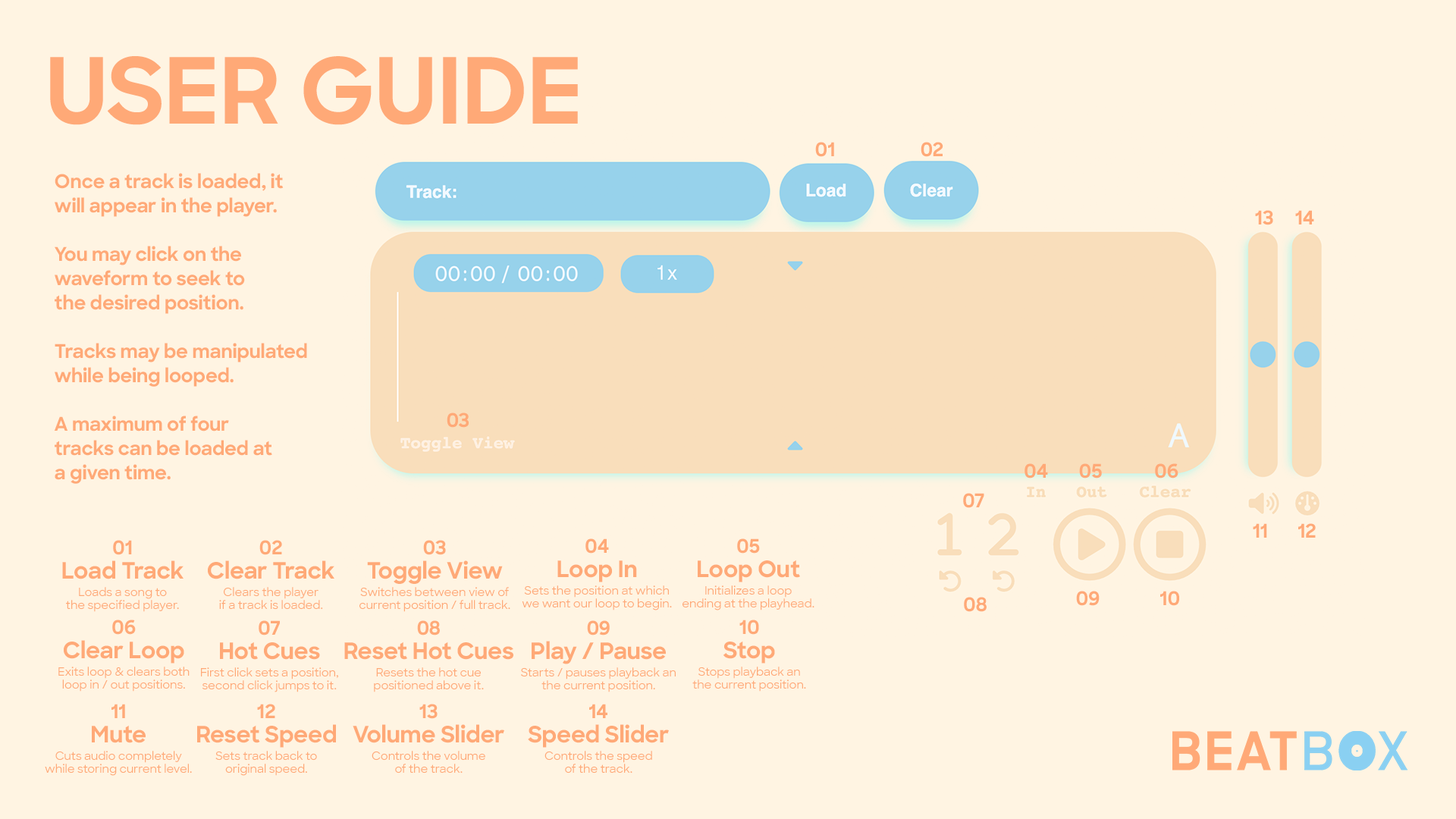
<style>
.page{position:relative;width:1456px;height:819px;background:#fff4e2}
.page>*{position:absolute;margin:0}
.t1{font:91px "SharpSans-Bold";letter-spacing:-0.01em;color:#ffa977}
.t2{font:19px "SharpSans-Bold";letter-spacing:-0.01em;color:#ffa977}
.t3{font:19px/24.3px "SharpSans-Bold";letter-spacing:-0.01em;color:#ffa977}
.t4{font:11.4px/12.9px "SharpSans-Medium";letter-spacing:-0.01em;color:#ffa977}
.t5{font:22.7px/24.3px "SharpSans-Bold";letter-spacing:-0.01em;color:#ffa977}
.t6{font:11.4px/17.4px "SharpSans-Medium";letter-spacing:-0.01em;color:#ffa977}
</style>
<div class="page">
<p class="t1" style="left:50px;top:56px;width:528px;height:69px">USER GUIDE</p>
<p class="t2" style="left:815px;top:142px;width:19px;height:15px">01</p>
<p class="t2" style="left:921px;top:142px;width:22px;height:15px">02</p>
<p class="t3" style="left:54px;top:173px;width:253px;height:311px">Once a track is loaded, it<br>will appear in the player.<br><br>You may click on the <br>waveform to seek to<br>the desired position.<br><br>Tracks may be manipulated<br>while being looped.<br><br>A maximum of four<br>tracks can be loaded at<br>a given time.</p>
<p class="t2" style="left:1255px;top:210px;width:59px;height:15px">13     14</p>
<p class="t2" style="left:447px;top:413px;width:22px;height:15px">03</p>
<p class="t2" style="left:1024px;top:463px;width:24px;height:16px">04</p>
<p class="t2" style="left:1079px;top:463px;width:23px;height:16px">05</p>
<p class="t2" style="left:1155px;top:463px;width:23px;height:16px">06</p>
<p class="t2" style="left:963px;top:493px;width:21px;height:15px">07</p>
<p class="t2" style="left:1253px;top:523px;width:63px;height:15px">11       12</p>
<p class="t4" style="left:62px;top:540px;width:122px;height:72px;text-align:center"><span class="t3">01<br></span><span class="t5">Load Track<br></span><span class="t6">Load</span>s<span class="t6"> a song to<br></span>the specified player.</p>
<p class="t4" style="left:208px;top:540px;width:126px;height:70px;text-align:center"><span class="t3">02<br></span><span class="t5">Clear Track<br></span><span class="t6">Clears the player<br></span>if a track is loaded.</p>
<p class="t4" style="left:359px;top:540px;width:151px;height:72px;text-align:center"><span class="t3">03<br></span><span class="t5">Toggle View<br></span><span class="t6">Switches between view of<br></span>current position / full track.</p>
<p class="t6" style="left:522px;top:538px;width:150px;height:72px;text-align:center"><span class="t3">04<br></span><span class="t5">Loop In<br></span>Sets the position at which<br><span class="t4">we want our loop to begin.</span></p>
<p class="t4" style="left:682px;top:538px;width:132px;height:72px;text-align:center"><span class="t3">05<br></span><span class="t5">Loop Out<br></span><span class="t6">Initializes a loop<br></span>ending at the playhead.</p>
<p class="t2" style="left:1076px;top:591px;width:24px;height:15px">09</p>
<p class="t2" style="left:1160px;top:591px;width:19px;height:15px">10</p>
<p class="t2" style="left:964px;top:597px;width:23px;height:15px">08</p>
<p class="t6" style="left:58px;top:620px;width:132px;height:72px;text-align:center"><span class="t3">06<br></span><span class="t5">Clear Loop<br></span>Exits loop &amp; clears both<br><span class="t4">loop in / out positions.</span></p>
<p class="t6" style="left:201px;top:620px;width:137px;height:72px;text-align:center"><span class="t3">07<br></span><span class="t5">Hot Cues<br></span>First click sets a position,<br><span class="t4">second click jumps to it.</span></p>
<p class="t4" style="left:344px;top:620px;width:169px;height:72px;text-align:center"><span class="t3">08<br></span><span class="t5">Reset Hot Cues<br></span><span class="t6">Resets the hot cue<br></span>positioned above it.</p>
<p class="t6" style="left:521px;top:620px;width:155px;height:72px;text-align:center"><span class="t3">09<br></span><span class="t5">Play / Pause<br></span>Starts / pauses playback an<br><span class="t4">the current position.</span></p>
<p class="t4" style="left:692px;top:620px;width:114px;height:72px;text-align:center"><span class="t3">10<br></span><span class="t5">Stop<br></span><span class="t6">Stops playback an<br></span>the current position.</p>
<p class="t4" style="left:45px;top:704px;width:147px;height:72px;text-align:center"><span class="t3">11<br></span><span class="t5">Mute<br></span><span class="t6">Cuts audio completely<br></span>while storing current level.</p>
<p class="t6" style="left:197px;top:704px;width:139px;height:72px;text-align:center"><span class="t3">12<br></span><span class="t5">Reset Speed<br></span>Sets track back to<br><span class="t4">original speed.</span></p>
<p class="t6" style="left:353px;top:704px;width:151px;height:69px;text-align:center"><span class="t3">13<br></span><span class="t5">Volume Slider<br></span>Controls the volume<br><span class="t4">of the track.</span></p>
<p class="t6" style="left:528px;top:704px;width:141px;height:69px;text-align:center"><span class="t3">14<br></span><span class="t5">Speed Slider<br></span>Controls the speed<br><span class="t4">of the track.</span></p>
</div>
